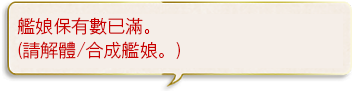
<style>
.page{position:relative;width:352px;height:91px;background:#f5eee8}
.page>*{position:absolute;margin:0}
.t1{font:18px/24px "GothicMB101Pr6N-Light";color:#c90000}
</style>
<div class="page">
<p class="t1" style="left:17px;top:17px;width:163px;height:42px">艦娘保有數已滿。<br>(請解體/合成艦娘。)</p>
</div>
